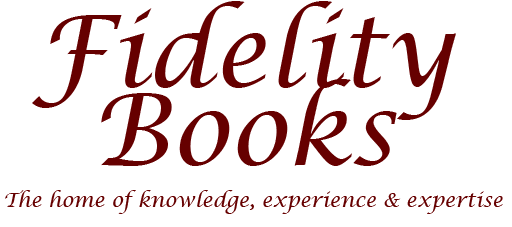
<style>
.page{position:relative;width:512px;height:227px;background:#ffffff}
.page>*{position:absolute;margin:0}
.t1{font:20px "LucidaCalligraphy-Italic";color:#660000}
</style>
<div class="page">
<p class="t1" style="left:5px;top:190px;width:498px;height:24px">The home of knowledge, experience &amp; expertise</p>
</div>
